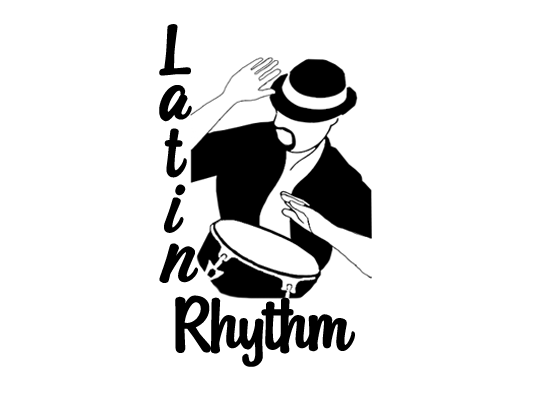
<style>
.page{position:relative;width:550px;height:400px;background:#ffffff}
.page>*{position:absolute;margin:0}
.t1{font:73.6px "MangoDrink-Regular";color:#000000;scale:1.25 1}
.t2{font:84.8px "MangoDrink-Regular";color:#000000;scale:1.09 1}
.t3{font:80.8px "MangoDrink-Regular";color:#000000;scale:1.09 1}
.t4{font:79.8px "MangoDrink-Regular";color:#000000;scale:1.11 1}
</style>
<div class="page">
<p class="t1" style="left:159px;top:24px;width:32px;height:52px;rotate:-3deg">L</p>
<p class="t2" style="left:159px;top:85px;width:33px;height:37px;rotate:15deg">a</p>
<p class="t3" style="left:164px;top:128px;width:23px;height:50px;rotate:2deg">t</p>
<p class="t2" style="left:164px;top:184px;width:22px;height:49px;rotate:15deg">i</p>
<p class="t2" style="left:159px;top:243px;width:39px;height:40px;rotate:15deg">n</p>
<p class="t4" style="left:175px;top:295px;width:180px;height:72px">Rhythm</p>
</div>
